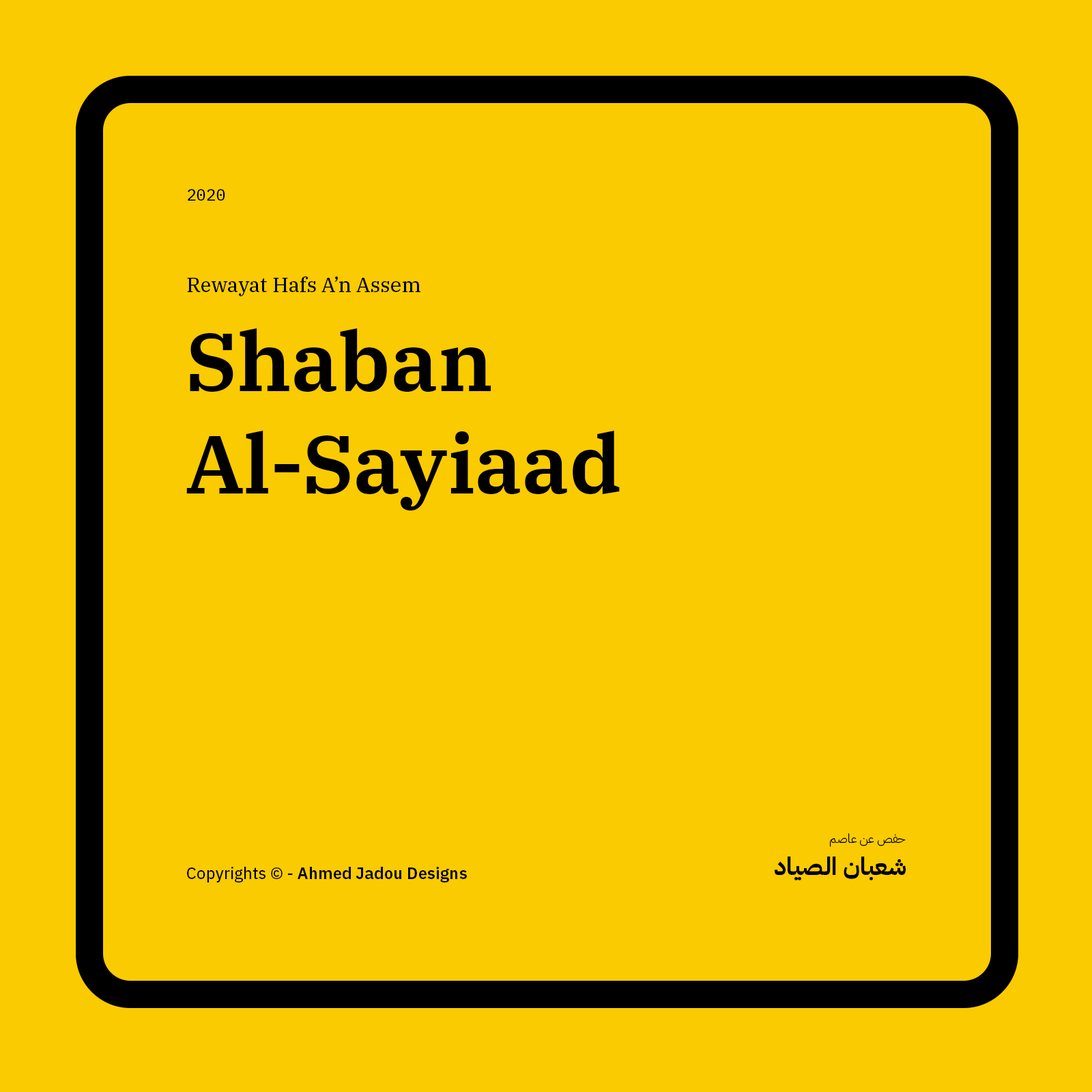
<style>
.page{position:relative;width:1092px;height:1092px;background:#facb00}
.page>*{position:absolute;margin:0}
.t1{font:16.4px "IBMPlexMono-Text";color:#000000}
.t2{font:20.5px "IBMPlexSerif-Text";color:#000000}
.t3{font:81.9px/102.7px "IBMPlexSerif-SemiBold";color:#000000}
.t4{font:12.3px "IBMPlexArabic-Light";color:#000000}
.t5{font:24.6px "IBMPlexArabic-Bold";color:#000000}
.t6{font:16.4px "IBMPlexSans-SemiBold";color:#000000}
.t7{font:16.4px "IBMPlexSans-Text";color:#000000}
</style>
<div class="page">
<p class="t1" style="left:188px;top:189px;width:37px;height:12px">2020</p>
<p class="t2" style="left:187px;top:276px;width:233px;height:20px">Rewayat Hafs A’n Assem</p>
<p class="t3" style="left:186px;top:328px;width:434px;height:183px">Shaban Al-Sayiaad</p>
<p class="t4" style="left:830px;top:833px;width:76px;height:14px">حفص عن عاصم</p>
<p class="t5" style="left:775px;top:857px;width:131px;height:23px">شعبان الصياد</p>
<p class="t6" style="left:187px;top:867px;width:280px;height:15px"><span class="t7">Copyrights © - </span>Ahmed Jadou Designs</p>
</div>
